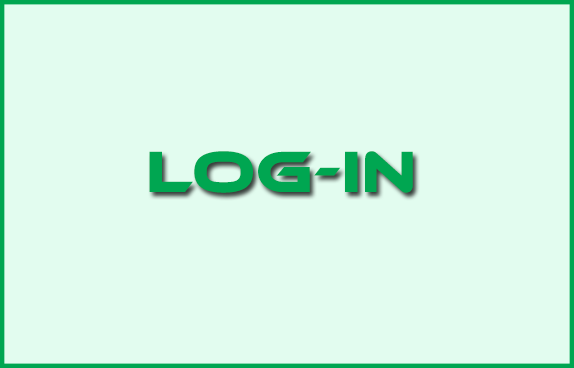
<style>
.page{position:relative;width:574px;height:368px;background:#e2fcef}
.page>*{position:absolute;margin:0}
.t1{font:60px "EthnocentricRg-Regular";color:#00a651}
</style>
<div class="page">
<p class="t1" style="left:149px;top:151px;width:264px;height:42px">log-IN</p>
</div>
